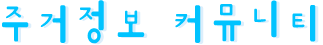
<style>
.page{position:relative;width:323px;height:45px;background:#ffffff}
.page>*{position:absolute;margin:0}
.t1{font:48px "PianoB";letter-spacing:-0.05em;color:#00c3ff;scale:0.85 1}
</style>
<div class="page">
<p class="t1" style="left:2px;top:0px;width:314px;height:44px">주거정보 커뮤니티</p>
</div>
